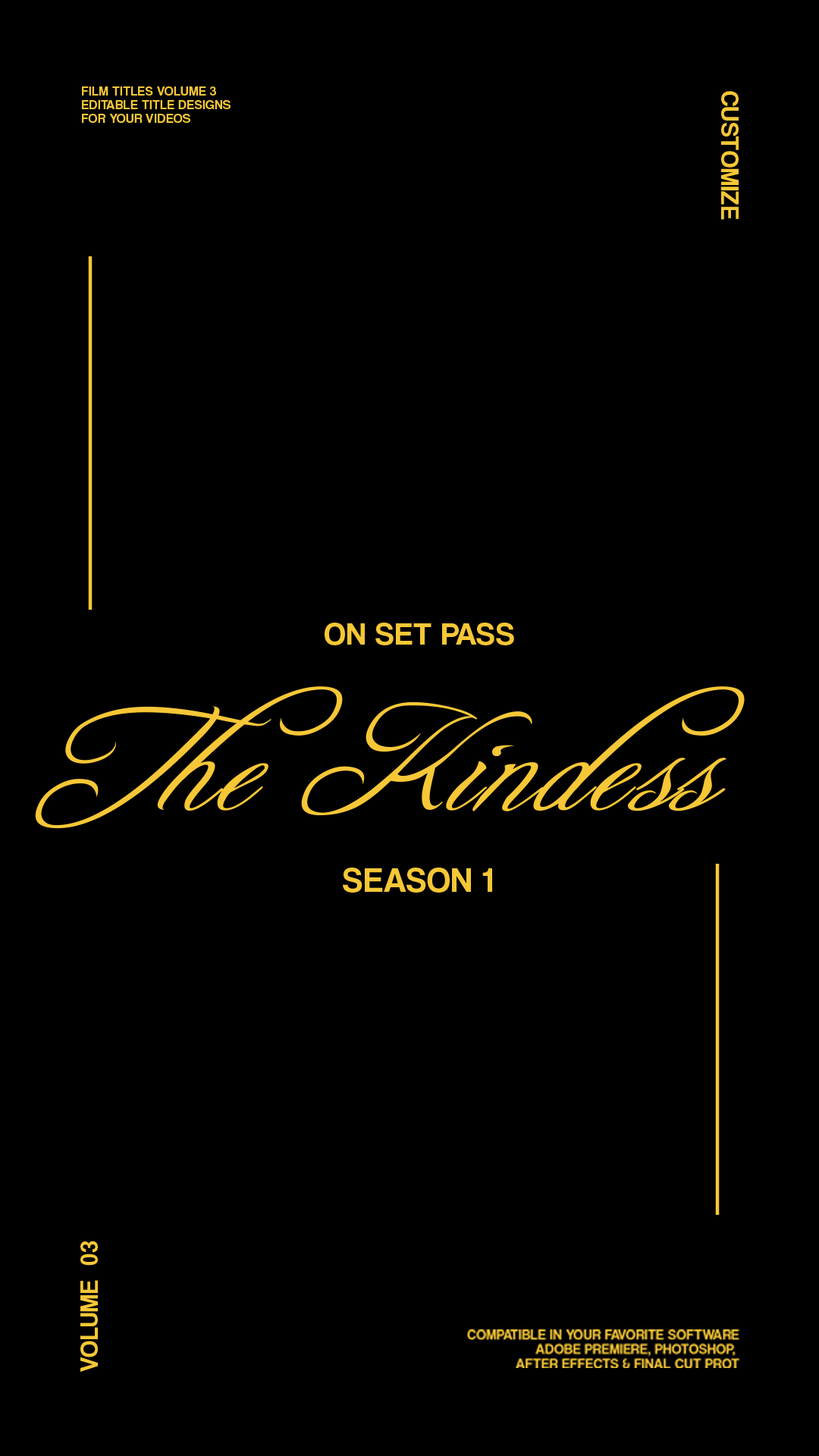
<style>
.page{position:relative;width:819px;height:1456px;background:#000000}
.page>*{position:absolute;margin:0}
.t1{font:13.4px/13.5px "CoolveticaRg-Regular";letter-spacing:0.03em;color:#f6c736}
.t2{font:25px "CoolveticaRg-Regular";letter-spacing:0.03em;color:#f6c736}
.t3{font:32.5px "CoolveticaRg-Regular";letter-spacing:0.03em;color:#f6c736}
.t4{font:144.5px "FreebooterScript";letter-spacing:0.03em;color:#f6c736;font-style:italic;scale:0.96 1}
.t5{font:35.1px "CoolveticaRg-Regular";letter-spacing:0.03em;color:#f6c736}
.t6{font:25.1px "CoolveticaRg-Regular";letter-spacing:0.03em;color:#f6c736}
</style>
<div class="page">
<p class="t1" style="left:82px;top:86px;width:149px;height:37px">FILM TITLES VOLUME 3<br>EDITABLE TITLE DESIGNS<br>FOR YOUR VIDEOS</p>
<p class="t2" style="left:721px;top:91px;width:18px;height:129px;rotate:90deg">CUSTOMIZE</p>
<p class="t3" style="left:325px;top:623px;width:189px;height:22px">ON SET PASS</p>
<p class="t4" style="left:35px;top:686px;width:710px;height:143px">The Kindess</p>
<p class="t5" style="left:343px;top:868px;width:149px;height:25px">SEASON 1</p>
<p class="t6" style="left:80px;top:1241px;width:18px;height:131px;rotate:-90deg">VOLUME  03</p>
</div>
